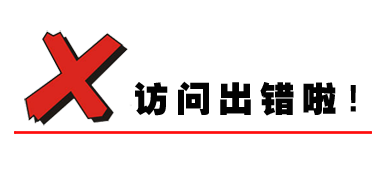
<style>
.page{position:relative;width:380px;height:180px;background:#ffffff}
.page>*{position:absolute;margin:0}
.t1{font:34.5px "HeitiEG-Ultra-GB";letter-spacing:0.2em;color:#020202}
</style>
<div class="page">
<p class="t1" style="left:135px;top:81px;width:221px;height:35px">访问出错啦！</p>
</div>
